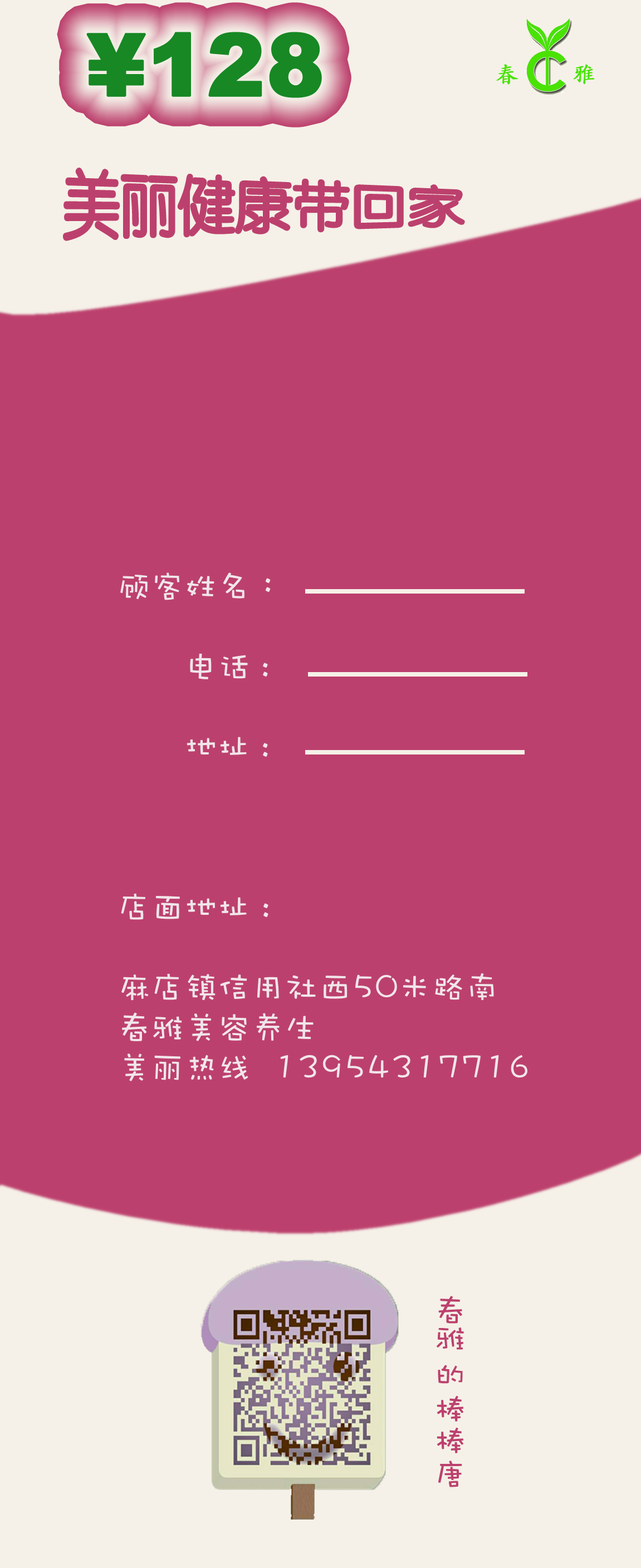
<style>
.page{position:relative;width:641px;height:1568px;background:#bc406d}
.page>*{position:absolute;margin:0}
.t1{font:86.2px "Arial-Black";color:#178824;font-weight:bold}
.t2{font:22.3px "STKaitiSC-Regular";color:#48e303;font-weight:bold}
.t3{font:57.4px "STYuanti-TC-Regular";color:#bc406d}
.t4{font:33.4px "DFWaWaSC-W5";color:#f1e6ea;font-variant:small-caps}
.t5{font:31.9px "DFWaWaSC-W5";color:#bc406d;font-variant:small-caps}
</style>
<div class="page">
<p class="t1" style="left:86px;top:32px;width:236px;height:66px">¥128</p>
<p class="t2" style="left:496px;top:64px;width:22px;height:21px">春</p>
<p class="t2" style="left:573px;top:64px;width:22px;height:20px">雅</p>
<p class="t3" style="left:64px;top:169px;width:400px;height:71px">美丽健康带回家</p>
<p class="t4" style="left:120px;top:572px;width:407px;height:509px">顾客姓名：<br><br>      电话 :<br><br>      地址 : <br><br><br><br>店面地址 :<br><br>麻店镇信用社西50米路南 <br>春雅美容养生   <br>美丽热线  13954317716</p>
<p class="t5" style="left:436px;top:1296px;width:28px;height:191px">春雅   的棒棒唐</p>
</div>
